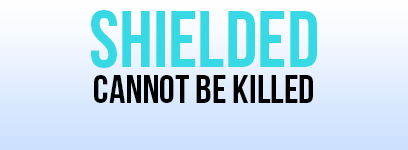
<style>
.page{position:relative;width:408px;height:150px}
.page>*{position:absolute;margin:0}
.t1{font:80px "BebasNeue";color:#37dae4}
.t2{font:40px "BebasNeue";color:#000000}
</style>
<div class="page">
<p class="t1" style="left:91px;top:10px;width:226px;height:58px">shielded</p>
<p class="t2" style="left:94px;top:75px;width:219px;height:28px">cannot be killed</p>
</div>
